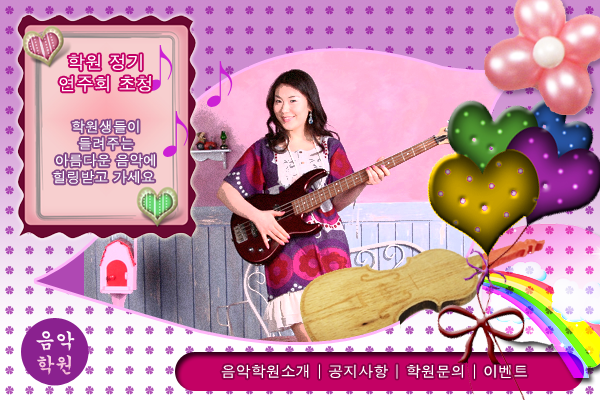
<style>
.page{position:relative;width:600px;height:400px}
.page>*{position:absolute;margin:0}
.t1{font:18px "Dotum";color:#ffffff;text-transform:uppercase}
.t2{font:14px "Dotum";color:#ffffff;text-transform:uppercase}
.t3{font:20px "Gungsuh";text-transform:uppercase}
.t4{font:15px "Dotum";color:#ffffff;text-transform:uppercase}
</style>
<div class="page">
<p class="t1" style="left:59px;top:54px;width:92px;height:38px;text-align:center">학원 정기<br>연주회 초청</p>
<p class="t2" style="left:53px;top:120px;width:102px;height:64px;text-align:center">학원생들이<br>들려주는<br>아름다운 음악에<br>힐링받고 가세요</p>
<p class="t3" style="left:36px;top:331px;width:39px;height:44px;text-align:center">음악<br>학원</p>
<p class="t4" style="left:221px;top:364px;width:306px;height:15px">음악학원소개 | 공지사항 | 학원문의 | 이벤트</p>
</div>
